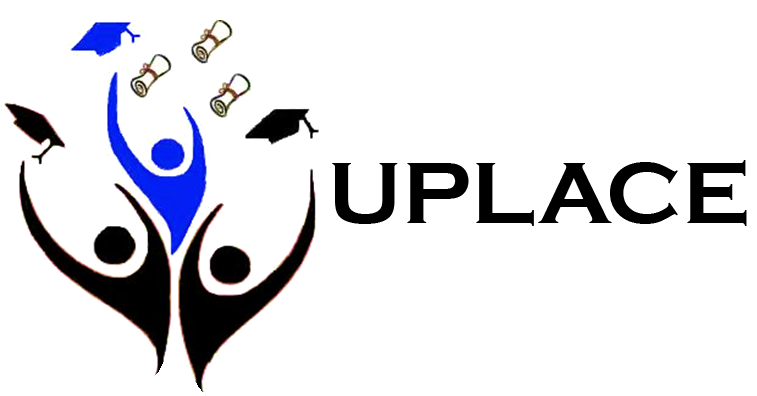
<style>
.page{position:relative;width:757px;height:396px;background:#ffffff}
.page>*{position:absolute;margin:0}
.t1{font:90px "CopperplateGothic-Bold";color:#000000}
</style>
<div class="page">
<p class="t1" style="left:332px;top:160px;width:415px;height:66px">UPLACE</p>
</div>
